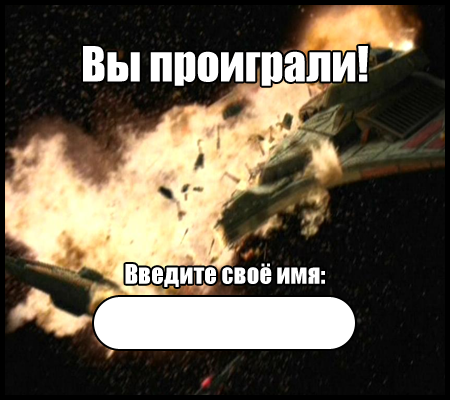
<style>
.page{position:relative;width:450px;height:400px}
.page>*{position:absolute;margin:0}
.t1{font:45px "Impact";color:#ffffff}
.t2{font:25px "Impact";color:#ffffff}
</style>
<div class="page">
<p class="t1" style="left:83px;top:46px;width:285px;height:40px">Вы проиграли!</p>
<p class="t2" style="left:125px;top:263px;width:200px;height:24px">Введите своё имя:</p>
</div>
